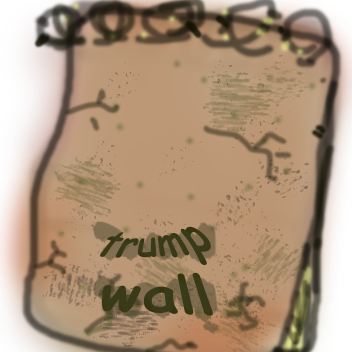
<style>
.page{position:relative;width:352px;height:352px}
.page>*{position:absolute;margin:0}
.t1{font:48px "ComicSansMS-Bold";color:#35360e}
</style>
<div class="page">
<p class="t1" style="left:100px;top:226px;width:113px;height:90px;text-align:center">trump wall</p>
</div>
